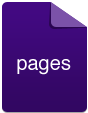
<style>
.page{position:relative;width:88px;height:113px}
.page>*{position:absolute;margin:0}
.t1{font:20px "Helvetica";color:#ffffff}
</style>
<div class="page">
<p class="t1" style="left:17px;top:59px;width:54px;height:16px">pages</p>
</div>
